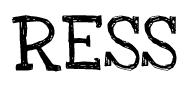
<style>
.page{position:relative;width:194px;height:88px;background:#ffffff}
.page>*{position:absolute;margin:0}
.t1{font:58.3px "LoveYaLikeASister";color:#000000}
</style>
<div class="page">
<p class="t1" style="left:11px;top:15px;width:166px;height:57px">RESS</p>
</div>
